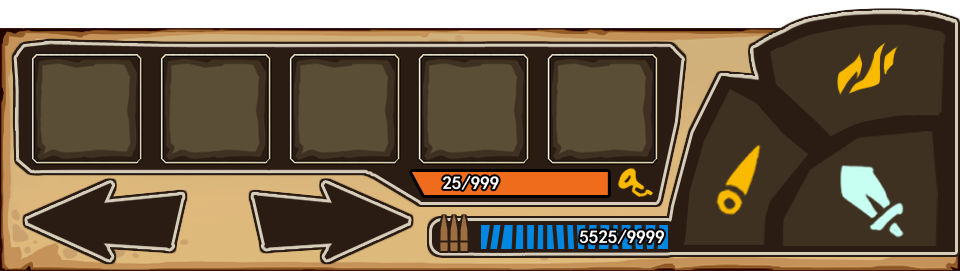
<style>
.page{position:relative;width:960px;height:271px;background:#2b1c13}
.page>*{position:absolute;margin:0}
.t1{font:18px "SimHei";color:#ffffff;font-weight:bold}
</style>
<div class="page">
<p class="t1" style="left:443px;top:175px;width:56px;height:15px">25/999</p>
<p class="t1" style="left:579px;top:229px;width:86px;height:15px">5525/9999</p>
</div>
